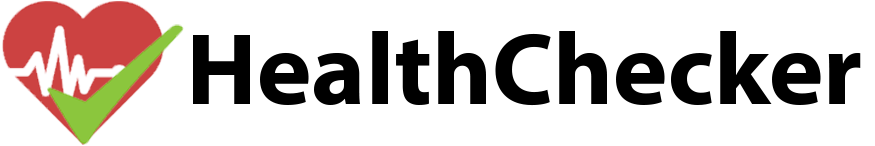
<style>
.page{position:relative;width:875px;height:146px;background:#ffffff}
.page>*{position:absolute;margin:0}
.t1{font:103px "MyriadPro-Bold";color:#000000}
</style>
<div class="page">
<p class="t1" style="left:193px;top:31px;width:668px;height:75px">HealthChecker</p>
</div>
